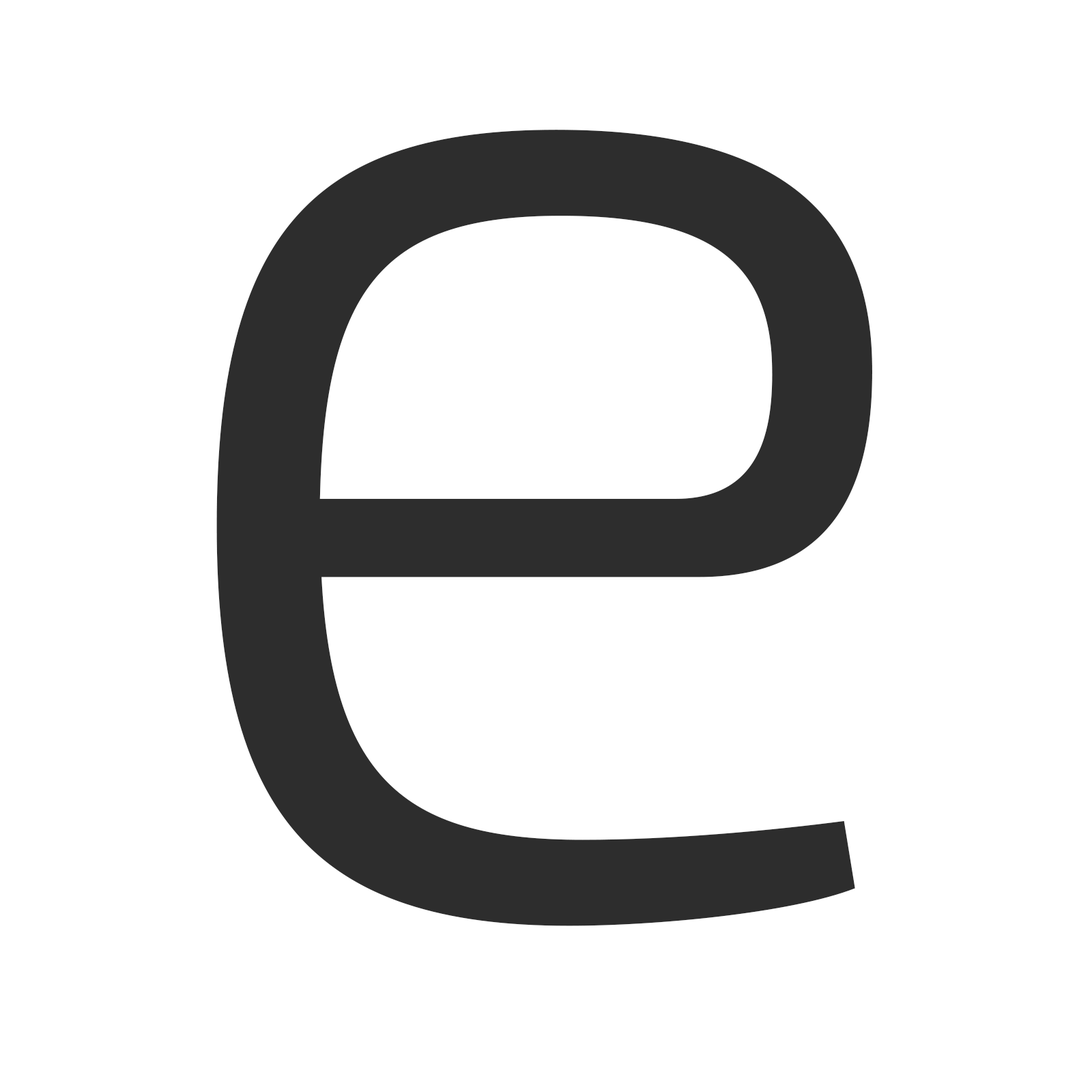
<style>
.page{position:relative;width:1092px;height:1092px;background:#ffffff}
.page>*{position:absolute;margin:0}
.t1{font:1563.9px "Exo2-Light";color:#2d2d2d}
</style>
<div class="page">
<p class="t1" style="left:216px;top:130px;width:656px;height:796px">e</p>
</div>
